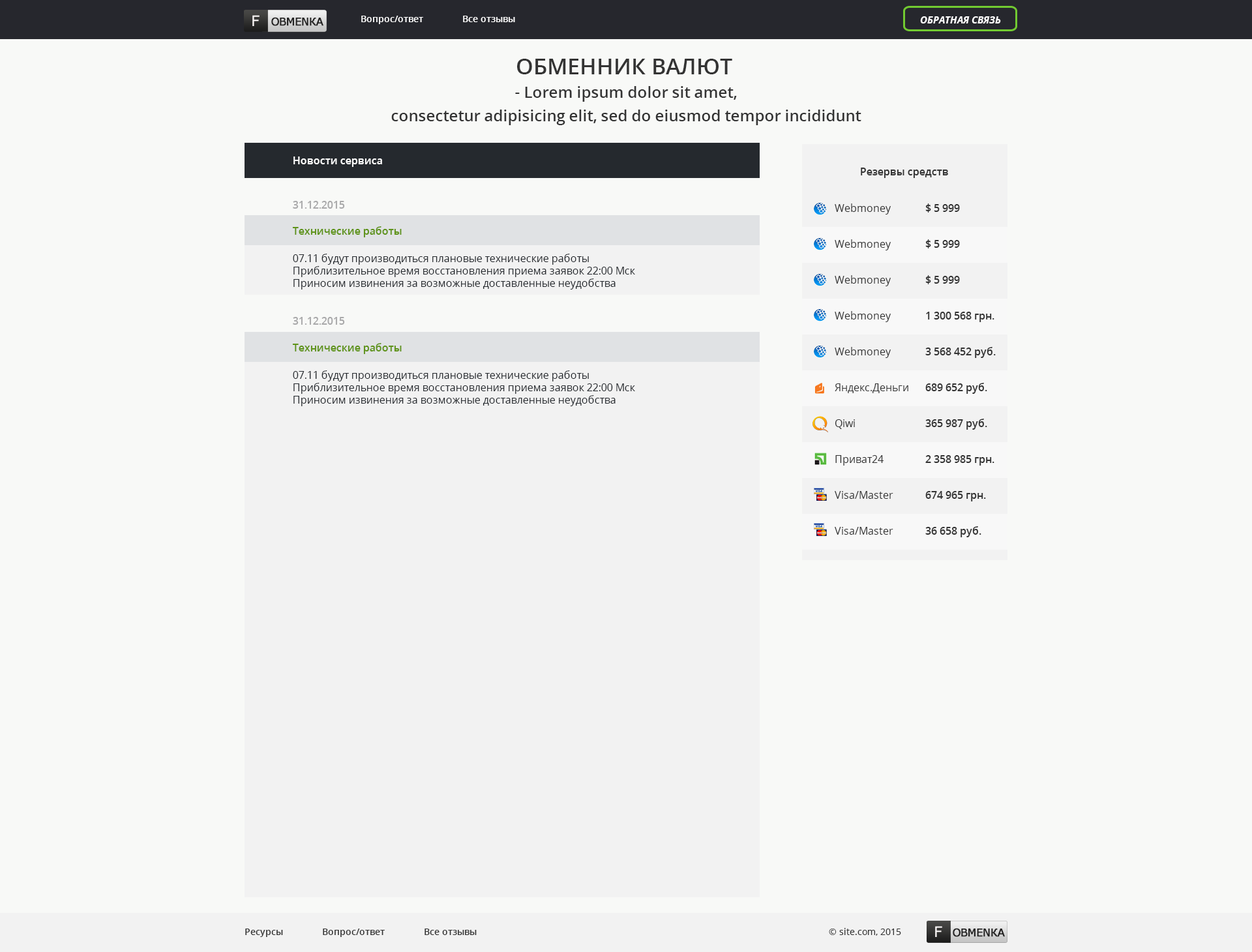
<style>
.page{position:relative;width:1252px;height:952px;background:#f8f9f7}
.page>*{position:absolute;margin:0}
.t1{font:14.6px "MSReferenceSansSerif";color:#fcf8f8;text-transform:uppercase}
.t2{font:10.8px "MSReferenceSansSerif";letter-spacing:-0.075em;color:#232222;text-transform:uppercase;font-weight:bold}
.t3{font:9.1px "OpenSans-Semibold";color:#ffffff}
.t4{font:9.8px "OpenSans-BoldItalic";color:#ffffff;text-transform:uppercase}
.t5{font:15.7px/23.5px "OpenSans-Semibold";color:#333333}
.t6{font:22.2px/23.5px "OpenSans-Semibold";color:#333333;text-transform:uppercase}
.t7{font:10.4px "OpenSans-Semibold";color:#ffffff}
.t8{font:10.4px "OpenSans-Semibold";color:#333333}
.t9{font:10.4px "OpenSans-Semibold";color:#a9a9aa}
.t10{font:10.4px/35.9px "OpenSans";color:#333333}
.t11{font:10.4px/35.9px "OpenSans-Semibold";color:#333333}
.t12{font:10.4px "OpenSans-Semibold";color:#5e9318}
.t13{font:10.4px "OpenSans";color:#25292e}
.t14{font:9.1px "OpenSans-Semibold";color:#333333}
.t15{font:9.1px "OpenSans";color:#333333}
</style>
<div class="page">
<p class="t1" style="left:252px;top:15px;width:8px;height:11px">f</p>
<p class="t2" style="left:271px;top:17px;width:52px;height:9px">Obmenка</p>
<p class="t3" style="left:361px;top:16px;width:154px;height:8px">Вопрос/ответ               Все отзывы</p>
<p class="t4" style="left:920px;top:16px;width:81px;height:7px">Обратная связь</p>
<p class="t5" style="left:391px;top:59px;width:471px;height:66px;text-align:center"><span class="t6">Обменник валют <br></span>- Lorem ipsum dolor sit amet,<br>consectetur adipisicing elit, sed do eiusmod tempor incididunt</p>
<p class="t7" style="left:293px;top:157px;width:89px;height:10px">Новости сервиса</p>
<p class="t8" style="left:861px;top:168px;width:87px;height:10px">Резервы средств</p>
<p class="t9" style="left:293px;top:201px;width:52px;height:8px">31.12.2015</p>
<p class="t10" style="left:835px;top:203px;width:74px;height:332px">Webmoney<br>Webmoney<br>Webmoney<br>Webmoney<br>Webmoney<br>Яндекс.Деньги<br>Qiwi<br>Приват24<br>Visa/Master<br>Visa/Master</p>
<p class="t11" style="left:925px;top:203px;width:71px;height:334px">$ 5 999<br>$ 5 999<br>$ 5 999<br>1 300 568 грн.<br>3 568 452 руб.<br>689 652 руб.<br>365 987 руб.<br>2 358 985 грн.<br>674 965 грн.<br>36 658 руб.</p>
<p class="t12" style="left:292px;top:226px;width:110px;height:11px">Технические работы</p>
<p class="t13" style="left:293px;top:254px;width:342px;height:36px">07.11 будут производиться плановые технические работы<br>Приблизительное время восстановления приема заявок 22:00 Мск<br>Приносим извинения за возможные доставленные неудобства</p>
<p class="t9" style="left:293px;top:317px;width:52px;height:8px">31.12.2015</p>
<p class="t12" style="left:292px;top:343px;width:110px;height:11px">Технические работы</p>
<p class="t13" style="left:293px;top:370px;width:342px;height:36px">07.11 будут производиться плановые технические работы<br>Приблизительное время восстановления приема заявок 22:00 Мск<br>Приносим извинения за возможные доставленные неудобства</p>
<p class="t14" style="left:245px;top:929px;width:232px;height:8px">Ресурсы               Вопрос/ответ               Все отзывы</p>
<p class="t15" style="left:829px;top:928px;width:72px;height:8px">© site.com, 2015</p>
<p class="t1" style="left:935px;top:926px;width:7px;height:11px">f</p>
<p class="t2" style="left:953px;top:928px;width:52px;height:9px">Obmenка</p>
</div>
